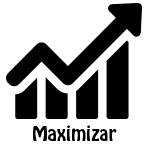
<style>
.page{position:relative;width:148px;height:148px;background:#ffffff}
.page>*{position:absolute;margin:0}
.t1{font:18px "HoboStd";color:#000000}
</style>
<div class="page">
<p class="t1" style="left:33px;top:125px;width:84px;height:16px">Maximizar</p>
</div>
